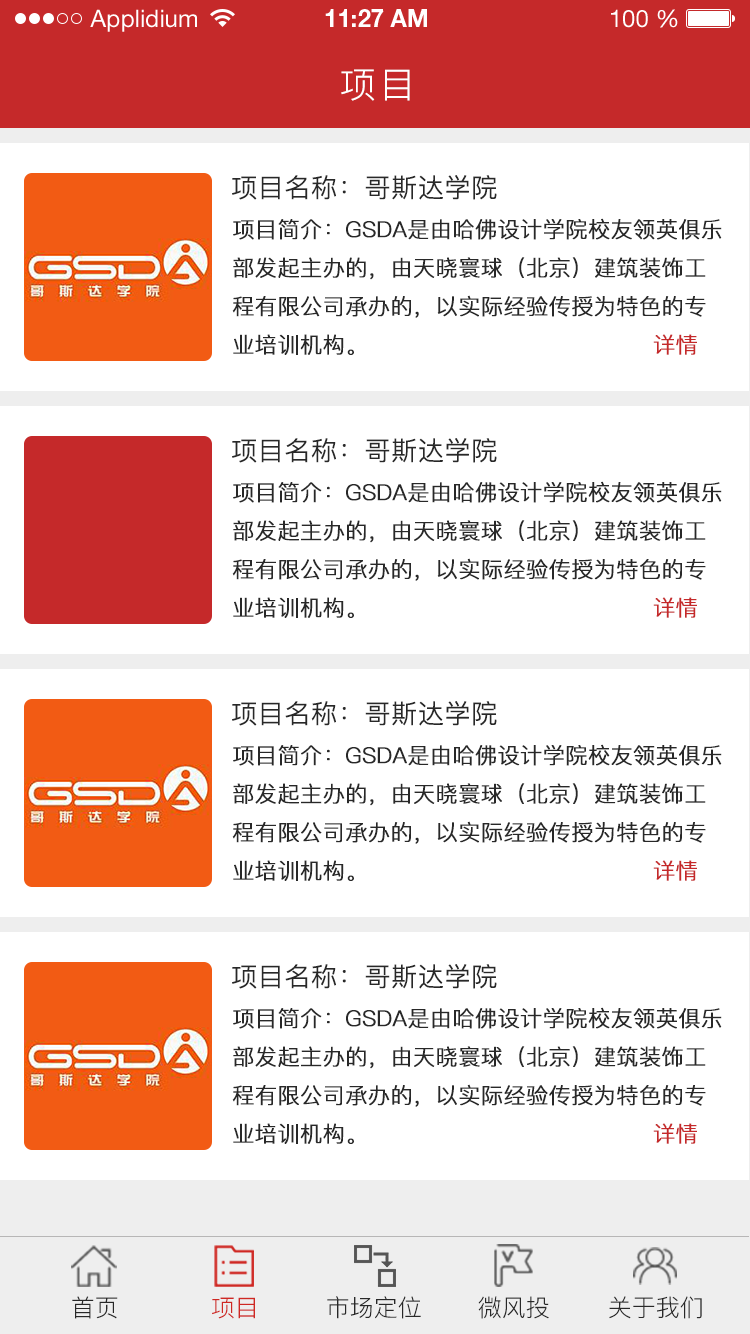
<style>
.page{position:relative;width:750px;height:1334px;background:#ffffff}
.page>*{position:absolute;margin:0}
.t1{font:24px "HelveticaNeueLTStd-Roman";color:#ffffff}
.t2{font:24px "HelveticaNeueLTStd-Bd";color:#ffffff}
.t3{font:36px "PingFang-SC-Regular";letter-spacing:0.1em;color:#ffffff;text-transform:uppercase}
.t4{font:26px "PingFang-SC-Regular";color:#282828;font-weight:bold}
.t5{font:22px "PingFang-SC-Regular";color:#282828;font-weight:bold}
.t6{font:22px "PingFang-SC-Regular";color:#c5292a;font-weight:bold}
.t7{font:24px "PingFang-SC-Regular";color:#282828}
.t8{font:24px "PingFang-SC-Regular";color:#cf2823}
</style>
<div class="page">
<p class="t1" style="left:90px;top:9px;width:107px;height:23px">Applidium</p>
<p class="t2" style="left:325px;top:9px;width:102px;height:18px">11:27 AM</p>
<p class="t1" style="left:611px;top:9px;width:67px;height:19px">100 %</p>
<p class="t3" style="left:341px;top:69px;width:69px;height:32px">项目</p>
<p class="t4" style="left:232px;top:175px;width:265px;height:25px">项目名称：哥斯达学院</p>
<p class="t5" style="left:232px;top:218px;width:490px;height:137px">项目简介：GSDA是由哈佛设计学院校友领英俱乐部发起主办的，由天晓寰球（北京）建筑装饰工程有限公司承办的，以实际经验传授为特色的专业培训机构。                                    <span class="t6">详情</span></p>
<p class="t4" style="left:232px;top:438px;width:265px;height:25px">项目名称：哥斯达学院</p>
<p class="t5" style="left:232px;top:481px;width:490px;height:137px">项目简介：GSDA是由哈佛设计学院校友领英俱乐部发起主办的，由天晓寰球（北京）建筑装饰工程有限公司承办的，以实际经验传授为特色的专业培训机构。                                    <span class="t6">详情</span></p>
<p class="t4" style="left:232px;top:701px;width:265px;height:25px">项目名称：哥斯达学院</p>
<p class="t5" style="left:232px;top:744px;width:490px;height:137px">项目简介：GSDA是由哈佛设计学院校友领英俱乐部发起主办的，由天晓寰球（北京）建筑装饰工程有限公司承办的，以实际经验传授为特色的专业培训机构。                                    <span class="t6">详情</span></p>
<p class="t4" style="left:232px;top:964px;width:265px;height:25px">项目名称：哥斯达学院</p>
<p class="t5" style="left:232px;top:1007px;width:490px;height:137px">项目简介：GSDA是由哈佛设计学院校友领英俱乐部发起主办的，由天晓寰球（北京）建筑装饰工程有限公司承办的，以实际经验传授为特色的专业培训机构。                                    <span class="t6">详情</span></p>
<p class="t7" style="left:72px;top:1296px;width:46px;height:23px">首页</p>
<p class="t8" style="left:212px;top:1297px;width:43px;height:22px">项目</p>
<p class="t7" style="left:327px;top:1296px;width:94px;height:23px">市场定位</p>
<p class="t7" style="left:478px;top:1296px;width:71px;height:23px">微风投</p>
<p class="t7" style="left:609px;top:1296px;width:93px;height:23px">关于我们</p>
</div>
